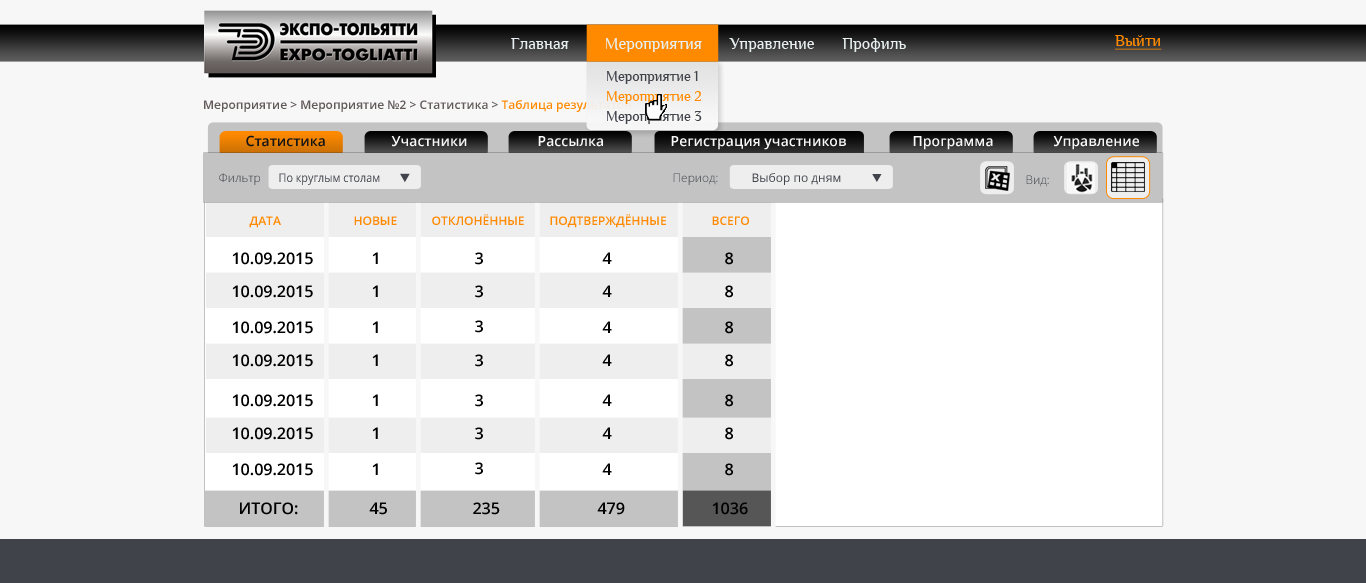
<style>
.page{position:relative;width:1366px;height:583px;background:#f7f7f7}
.page>*{position:absolute;margin:0}
.t1{font:16.5px "Philosopher";color:#e7eff1}
.t2{font:16px "Philosopher";color:#ff8a00;text-decoration:underline}
.t3{font:14.4px/20px "Philosopher";color:#40434a}
.t4{font:14.4px/20px "Philosopher";color:#ff8a00}
.t5{font:12px "OpenSans-Semibold";color:#615a59}
.t6{font:12px "OpenSans-Semibold";color:#ff8a00}
.t7{font:14px "OpenSans-Semibold";color:#151515}
.t8{font:14px "OpenSans-Semibold";color:#f7f7f7}
.t9{font:12px "OpenSans-Light"}
.t10{font:12px "OpenSans";color:#40434a;scale:0.9 1}
.t11{font:12px "OpenSans";color:#40434a}
.t12{font:12px "OpenSans-Semibold";color:#ff8a00;text-transform:uppercase}
.t13{font:16px "OpenSans-Semibold";color:#000000}
</style>
<div class="page">
<p class="t1" style="left:511px;top:38px;width:395px;height:14px">Главная         Мероприятия       Управление       Профиль</p>
<p class="t2" style="left:1115px;top:35px;width:47px;height:15px">Выйти</p>
<p class="t3" style="left:607px;top:71px;width:95px;height:53px">Мероприятие 1<br><span class="t4">Мероприятие 2<br></span>Мероприятие 3</p>
<p class="t5" style="left:204px;top:100px;width:427px;height:12px">Мероприятие &gt; Мероприятие №2 &gt; Статистика &gt; <span class="t6">Таблица результатов</span></p>
<p class="t7" style="left:246px;top:135px;width:79px;height:12px">Статистика</p>
<p class="t8" style="left:391px;top:136px;width:76px;height:11px">Участники</p>
<p class="t8" style="left:538px;top:136px;width:65px;height:11px">Рассылка</p>
<p class="t8" style="left:671px;top:136px;width:175px;height:14px">Регистрация участников</p>
<p class="t8" style="left:913px;top:136px;width:80px;height:14px">Программа</p>
<p class="t8" style="left:1053px;top:136px;width:86px;height:14px">Управление</p>
<p class="t9" style="left:219px;top:173px;width:41px;height:12px">Фильтр</p>
<p class="t10" style="left:279px;top:173px;width:101px;height:12px">По круглым столам</p>
<p class="t9" style="left:673px;top:173px;width:45px;height:12px">Период:</p>
<p class="t11" style="left:752px;top:173px;width:89px;height:12px">Выбор по дням</p>
<p class="t9" style="left:1026px;top:175px;width:23px;height:12px">Вид:</p>
<p class="t12" style="left:249px;top:216px;width:32px;height:12px">дата</p>
<p class="t12" style="left:354px;top:216px;width:43px;height:9px">новые</p>
<p class="t12" style="left:432px;top:214px;width:92px;height:11px">отклонённые</p>
<p class="t12" style="left:550px;top:214px;width:116px;height:14px">подтверждённые</p>
<p class="t12" style="left:712px;top:216px;width:37px;height:9px">ВСЕГО</p>
<p class="t13" style="left:232px;top:252px;width:81px;height:13px">10.09.2015</p>
<p class="t13" style="left:372px;top:252px;width:6px;height:12px">1</p>
<p class="t13" style="left:475px;top:252px;width:8px;height:13px">3</p>
<p class="t13" style="left:602px;top:252px;width:10px;height:12px">4</p>
<p class="t13" style="left:725px;top:252px;width:8px;height:13px">8</p>
<p class="t13" style="left:232px;top:285px;width:81px;height:13px">10.09.2015</p>
<p class="t13" style="left:372px;top:285px;width:6px;height:12px">1</p>
<p class="t13" style="left:475px;top:285px;width:8px;height:13px">3</p>
<p class="t13" style="left:602px;top:285px;width:10px;height:12px">4</p>
<p class="t13" style="left:725px;top:285px;width:8px;height:13px">8</p>
<p class="t13" style="left:232px;top:321px;width:81px;height:13px">10.09.2015</p>
<p class="t13" style="left:372px;top:321px;width:6px;height:12px">1</p>
<p class="t13" style="left:475px;top:320px;width:8px;height:13px">3</p>
<p class="t13" style="left:602px;top:321px;width:10px;height:12px">4</p>
<p class="t13" style="left:725px;top:321px;width:8px;height:13px">8</p>
<p class="t13" style="left:232px;top:354px;width:81px;height:13px">10.09.2015</p>
<p class="t13" style="left:372px;top:354px;width:6px;height:12px">1</p>
<p class="t13" style="left:475px;top:354px;width:8px;height:13px">3</p>
<p class="t13" style="left:602px;top:354px;width:10px;height:12px">4</p>
<p class="t13" style="left:725px;top:354px;width:8px;height:13px">8</p>
<p class="t13" style="left:232px;top:394px;width:81px;height:13px">10.09.2015</p>
<p class="t13" style="left:372px;top:394px;width:6px;height:12px">1</p>
<p class="t13" style="left:475px;top:394px;width:8px;height:13px">3</p>
<p class="t13" style="left:602px;top:394px;width:10px;height:12px">4</p>
<p class="t13" style="left:725px;top:394px;width:8px;height:13px">8</p>
<p class="t13" style="left:232px;top:427px;width:81px;height:13px">10.09.2015</p>
<p class="t13" style="left:372px;top:427px;width:6px;height:12px">1</p>
<p class="t13" style="left:475px;top:427px;width:8px;height:13px">3</p>
<p class="t13" style="left:602px;top:427px;width:10px;height:12px">4</p>
<p class="t13" style="left:725px;top:427px;width:8px;height:13px">8</p>
<p class="t13" style="left:475px;top:462px;width:8px;height:13px">3</p>
<p class="t13" style="left:232px;top:463px;width:81px;height:13px">10.09.2015</p>
<p class="t13" style="left:372px;top:463px;width:6px;height:12px">1</p>
<p class="t13" style="left:602px;top:463px;width:10px;height:12px">4</p>
<p class="t13" style="left:725px;top:463px;width:8px;height:13px">8</p>
<p class="t13" style="left:240px;top:502px;width:58px;height:13px">ИТОГО:</p>
<p class="t13" style="left:369px;top:502px;width:18px;height:13px">45</p>
<p class="t13" style="left:473px;top:502px;width:27px;height:13px">235</p>
<p class="t13" style="left:597px;top:502px;width:28px;height:13px">479</p>
<p class="t13" style="left:712px;top:502px;width:36px;height:13px">1036</p>
</div>
